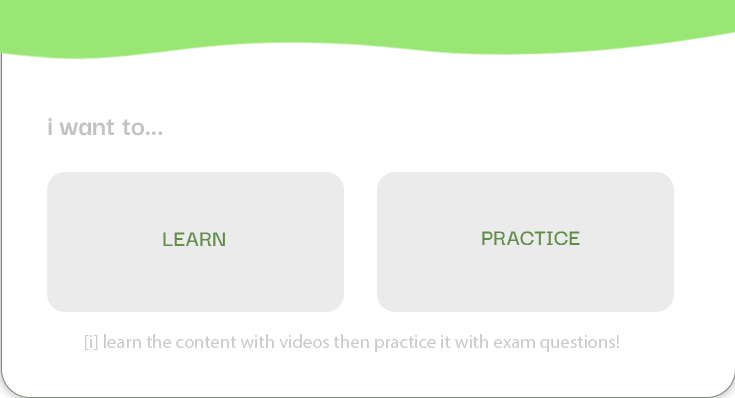
<style>
.page{position:relative;width:735px;height:398px;background:#ffffff}
.page>*{position:absolute;margin:0}
.t1{font:30px "DarkerGrotesque-Bold";color:#c3c3c3}
.t2{font:24.3px "DarkerGrotesque-SemiBold";color:#5f8f47}
.t3{font:18.7px "DarkerGrotesque-Regular";color:#cbcbcb}
</style>
<div class="page">
<p class="t1" style="left:48px;top:118px;width:115px;height:18px">i want to...</p>
<p class="t2" style="left:163px;top:232px;width:62px;height:14px">LEARN</p>
<p class="t2" style="left:482px;top:231px;width:98px;height:14px">PRACTICE</p>
<p class="t3" style="left:85px;top:334px;width:534px;height:18px">[i] learn the content with videos then practice it with exam questions!</p>
</div>
